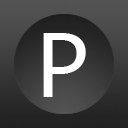
<style>
.page{position:relative;width:128px;height:128px}
.page>*{position:absolute;margin:0}
.t1{font:100px "Consolas";color:#ffffff}
</style>
<div class="page">
<p class="t1" style="left:43px;top:33px;width:43px;height:64px">P</p>
</div>
